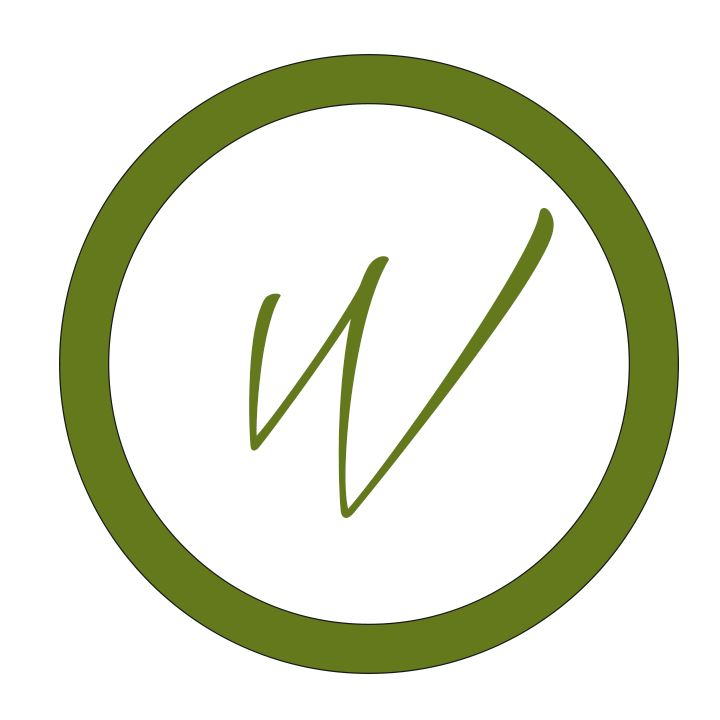
<style>
.page{position:relative;width:720px;height:720px;background:#ffffff}
.page>*{position:absolute;margin:0}
.t1{font:260px "Xtreem2PersonalUse";color:#64791c}
</style>
<div class="page">
<p class="t1" style="left:249px;top:208px;width:305px;height:310px">W</p>
</div>
